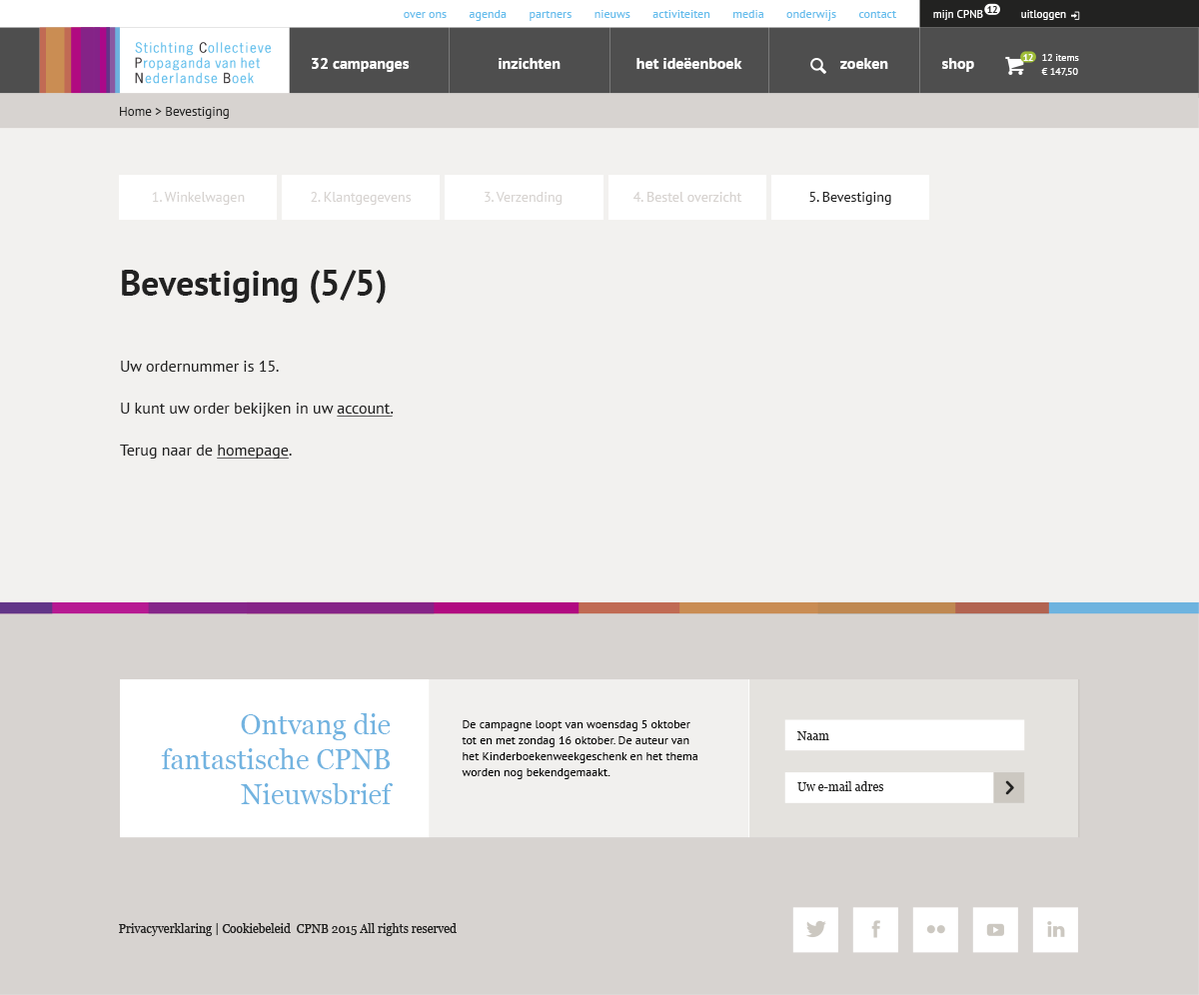
<style>
.page{position:relative;width:1199px;height:995px;background:#f2f1ef}
.page>*{position:absolute;margin:0}
.t1{font:10px "PTSans-Bold";letter-spacing:-0.05em;color:#222221}
.t2{font:12px "PTSans-Regular";color:#65bdec}
.t3{font:11.1px "PTSans-Regular";color:#ffffff}
.t4{font:10px "PTSans-Bold";letter-spacing:-0.05em;color:#ffffff}
.t5{font:10px/14px "PTSans-Regular";color:#ffffff}
.t6{font:16px "PTSans-Bold";color:#ffffff}
.t7{font:13px "PTSans-Regular";color:#222221}
.t8{font:14px "PTSans-Regular";color:#d7d3d0}
.t9{font:14px "PTSans-Regular";color:#222222}
.t10{font:36px "PTSans-Bold";color:#222222}
.t11{font:16px/21px "PTSans-Regular";color:#222222}
.t12{font:16px/21px "PTSans-Regular";color:#222222;text-decoration:underline}
.t13{font:28px/35px "Georgia";color:#5daadc}
.t14{font:12px/16px "PTSans-Regular";color:#000000}
.t15{font:12px "Georgia";color:#222221}
</style>
<div class="page">
<p class="t1" style="left:987px;top:6px;width:10px;height:7px">12</p>
<p class="t2" style="left:404px;top:10px;width:493px;height:11px">over ons       agenda       partners       nieuws       activiteiten       media       onderwijs       contact</p>
<p class="t3" style="left:933px;top:10px;width:50px;height:10px">mijn CPNB</p>
<p class="t3" style="left:1021px;top:10px;width:45px;height:10px">uitloggen</p>
<p class="t4" style="left:1023px;top:54px;width:10px;height:7px">12</p>
<p class="t5" style="left:1041px;top:54px;width:38px;height:22px">12 items<br>€ 147,50</p>
<p class="t6" style="left:312px;top:58px;width:98px;height:14px">32 campanges</p>
<p class="t6" style="left:498px;top:58px;width:62px;height:11px">inzichten</p>
<p class="t6" style="left:636px;top:58px;width:106px;height:11px">het ideëenboek</p>
<p class="t6" style="left:840px;top:58px;width:48px;height:11px">zoeken</p>
<p class="t6" style="left:941px;top:58px;width:33px;height:14px">shop</p>
<p class="t7" style="left:120px;top:107px;width:109px;height:12px">Home &gt; Bevestiging</p>
<p class="t8" style="left:152px;top:192px;width:93px;height:13px">1. Winkelwagen</p>
<p class="t8" style="left:311px;top:192px;width:101px;height:13px">2. Klantgegevens</p>
<p class="t8" style="left:484px;top:192px;width:78px;height:13px">3. Verzending</p>
<p class="t8" style="left:632px;top:192px;width:110px;height:10px">4. Bestel overzicht</p>
<p class="t9" style="left:809px;top:192px;width:82px;height:13px">5. Bevestiging</p>
<p class="t10" style="left:122px;top:270px;width:264px;height:34px">Bevestiging (5/5)</p>
<p class="t11" style="left:120px;top:361px;width:274px;height:97px">Uw ordernummer is 15. <br><br>U kunt uw order bekijken in uw <span class="t12">account.</span> <br><br>Terug naar de <span class="t12">homepage</span>.</p>
<p class="t13" style="left:161px;top:713px;width:232px;height:91px;text-align:right;opacity:0.9">Ontvang die<br>fantastische CPNB<br>Nieuwsbrief</p>
<p class="t14" style="left:461px;top:720px;width:237px;height:59px">De campagne loopt van woensdag 5 oktober tot en met zondag 16 oktober. De auteur van het Kinderboekenweekgeschenk en het thema worden nog bekendgemaakt.</p>
<p class="t15" style="left:797px;top:731px;width:32px;height:9px">Naam</p>
<p class="t15" style="left:797px;top:781px;width:87px;height:10px">Uw e-mail adres</p>
<p class="t15" style="left:119px;top:923px;width:337px;height:13px">Privacyverklaring | Cookiebeleid  CPNB 2015 All rights reserved</p>
</div>
